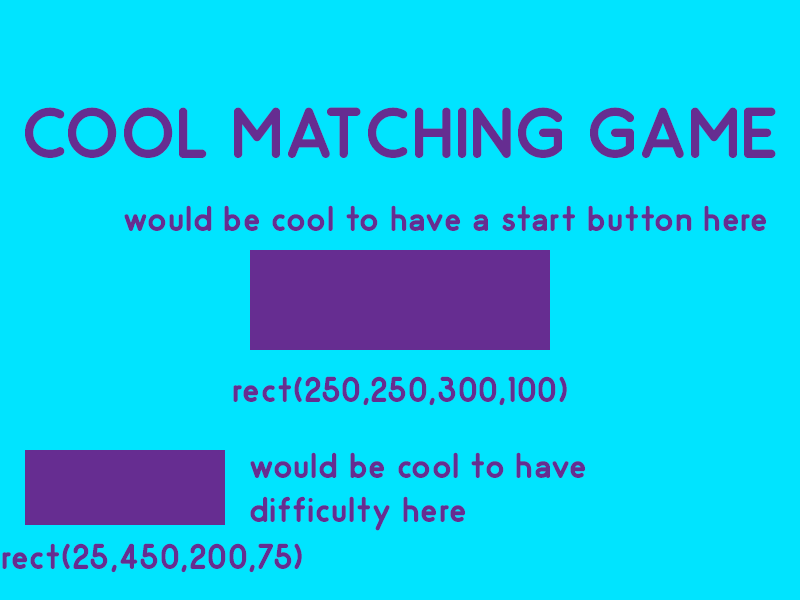
<style>
.page{position:relative;width:800px;height:600px;background:#00e4ff}
.page>*{position:absolute;margin:0}
.t1{font:72px "Odin-Bold";letter-spacing:0.02em;color:#662d91}
.t2{font:36px "Odin-Bold";letter-spacing:0.02em;color:#662d91}
</style>
<div class="page">
<p class="t1" style="left:25px;top:107px;width:751px;height:51px">COOL MATCHING GAME</p>
<p class="t2" style="left:124px;top:205px;width:643px;height:26px">would be cool to have a start button here</p>
<p class="t2" style="left:233px;top:376px;width:334px;height:30px">rect(250,250,300,100)</p>
<p class="t2" style="left:250px;top:452px;width:336px;height:79px">would be cool to have <br>difficulty here</p>
<p class="t2" style="left:2px;top:543px;width:300px;height:30px">rect(25,450,200,75)</p>
</div>
